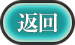
<style>
.page{position:relative;width:75px;height:45px}
.page>*{position:absolute;margin:0}
.t1{font:22px "RyuminPr6N-ExBold";color:#fdfbf9}
</style>
<div class="page">
<p class="t1" style="left:17px;top:12px;width:41px;height:21px">返回</p>
</div>
